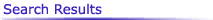
<style>
.page{position:relative;width:213px;height:20px;background:#ffffff}
.page>*{position:absolute;margin:0}
.t1{font:13.3px "Verdana";color:#3d24bd}
</style>
<div class="page">
<p class="t1" style="left:3px;top:3px;width:99px;height:12px">Search Results</p>
</div>
